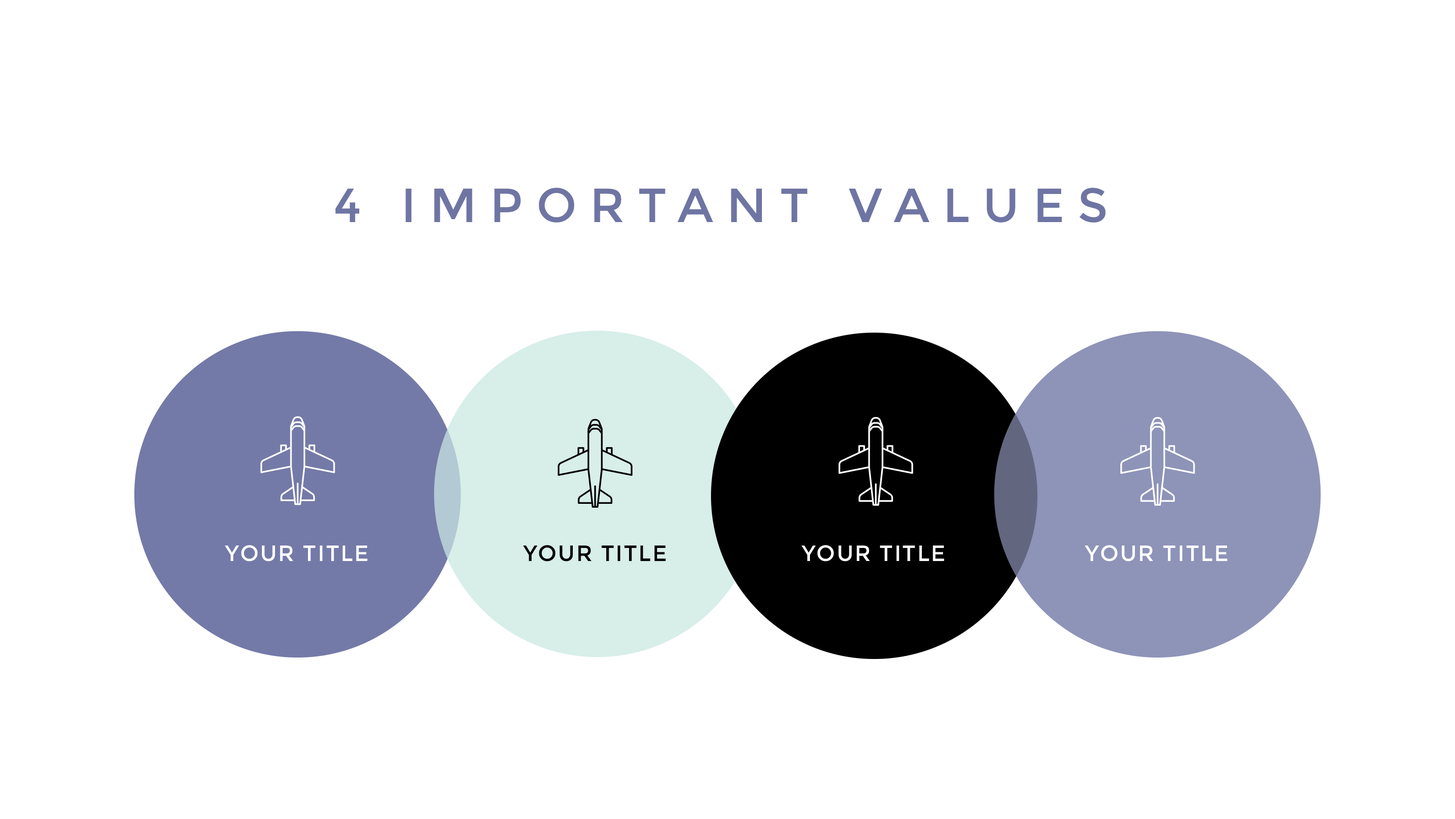
<style>
.page{position:relative;width:1455px;height:819px;background:#ffffff}
.page>*{position:absolute;margin:0}
.t1{font:47.9px "Montserrat-Regular";letter-spacing:0.28em;color:#6f75a3}
.t2{font:22.2px "Montserrat-Regular";letter-spacing:0.056em;color:#ffffff}
.t3{font:22.2px "Montserrat-Regular";letter-spacing:0.056em;color:#000000}
</style>
<div class="page">
<p class="t1" style="left:335px;top:188px;width:771px;height:35px">4 IMPORTANT VALUES</p>
<p class="t2" style="left:225px;top:545px;width:143px;height:17px">YOUR TITLE</p>
<p class="t3" style="left:523px;top:545px;width:143px;height:17px">YOUR TITLE</p>
<p class="t2" style="left:801px;top:545px;width:144px;height:17px">YOUR TITLE</p>
<p class="t2" style="left:1085px;top:545px;width:143px;height:17px">YOUR TITLE</p>
</div>
